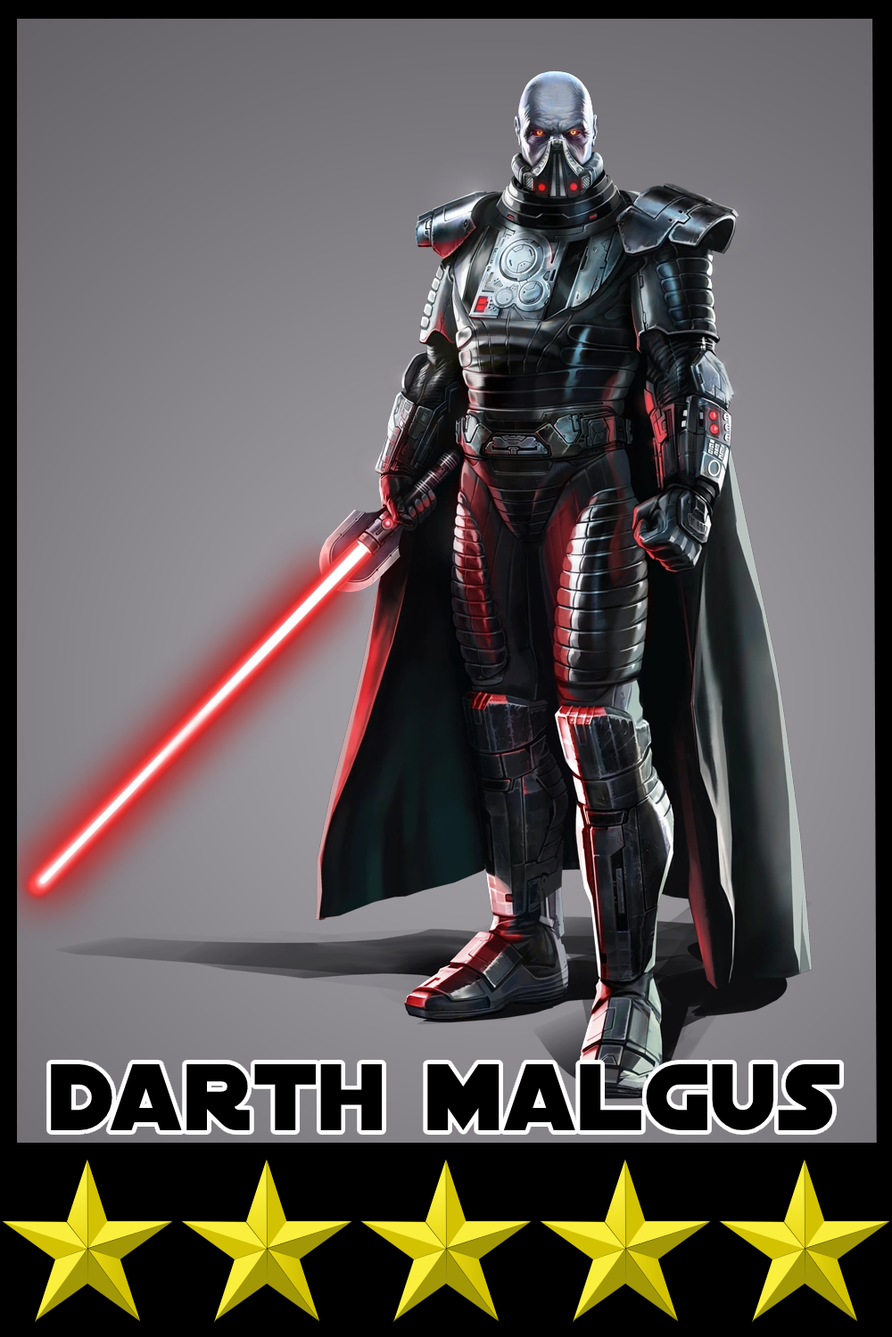
<style>
.page{position:relative;width:892px;height:1337px}
.page>*{position:absolute;margin:0}
.t1{font:101.6px "DistantGalaxy";color:#000000}
</style>
<div class="page">
<p class="t1" style="left:51px;top:1065px;width:788px;height:66px">darth malgus</p>
</div>
